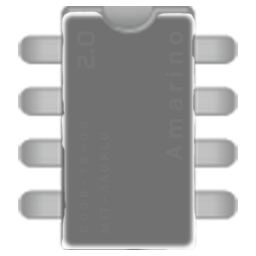
<style>
.page{position:relative;width:256px;height:256px;background:#727172}
.page>*{position:absolute;margin:0}
.t1{font:24.8px "SpaceBT-Bold";color:#787678;scale:0.9 1}
.t2{font:36px "FreesiaUPC";letter-spacing:0.15em;color:#787778;font-weight:bold;scale:1.05 1}
</style>
<div class="page">
<p class="t1" style="left:77px;top:31px;width:18px;height:38px;rotate:-90deg">2.0</p>
<p class="t2" style="left:165px;top:31px;width:18px;height:129px;rotate:-90deg">Amarino</p>
</div>
